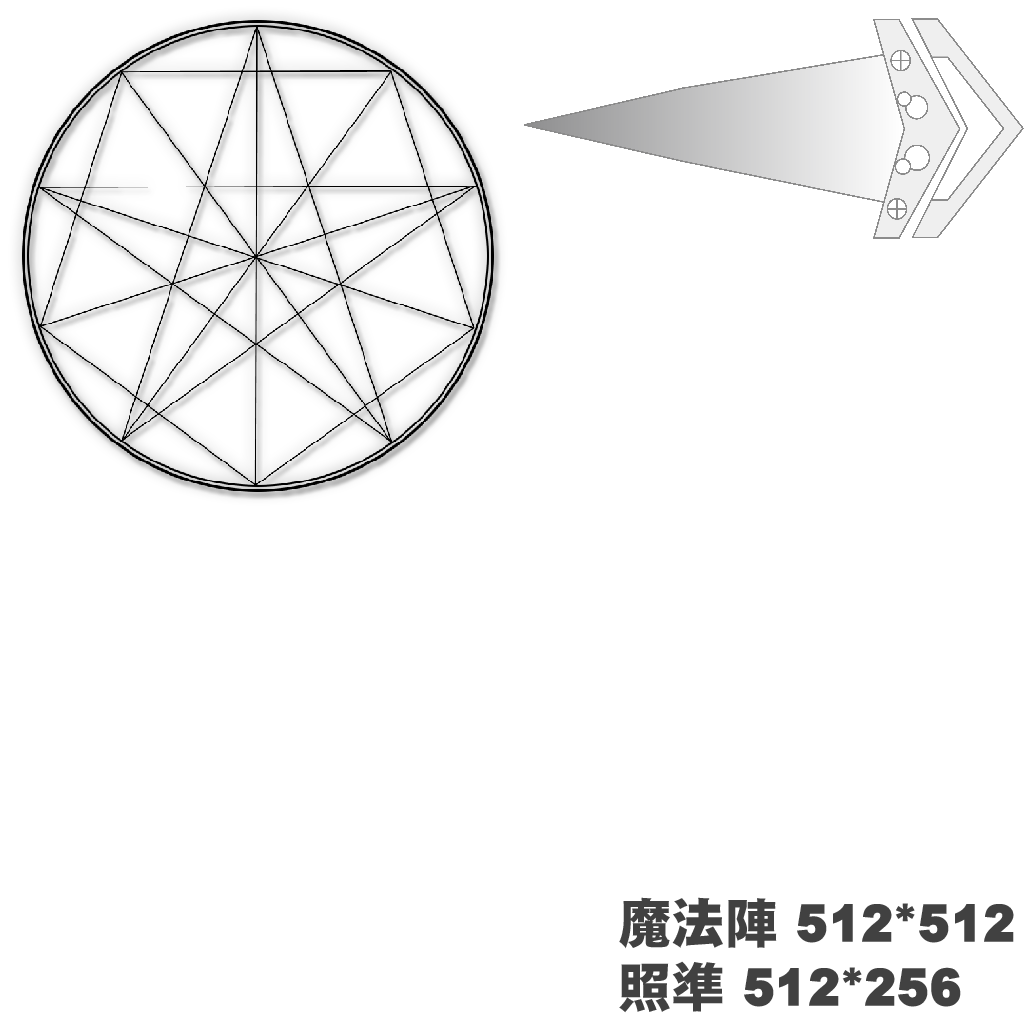
<style>
.page{position:relative;width:1024px;height:1024px;background:#ffffff}
.page>*{position:absolute;margin:0}
.t1{font:53.4px/64.1px "DHPGothic-EB-WIN-RKSJ-H";color:#414141}
</style>
<div class="page">
<p class="t1" style="left:619px;top:897px;width:395px;height:116px">魔法陣 512*512<br>照準 512*256</p>
</div>
